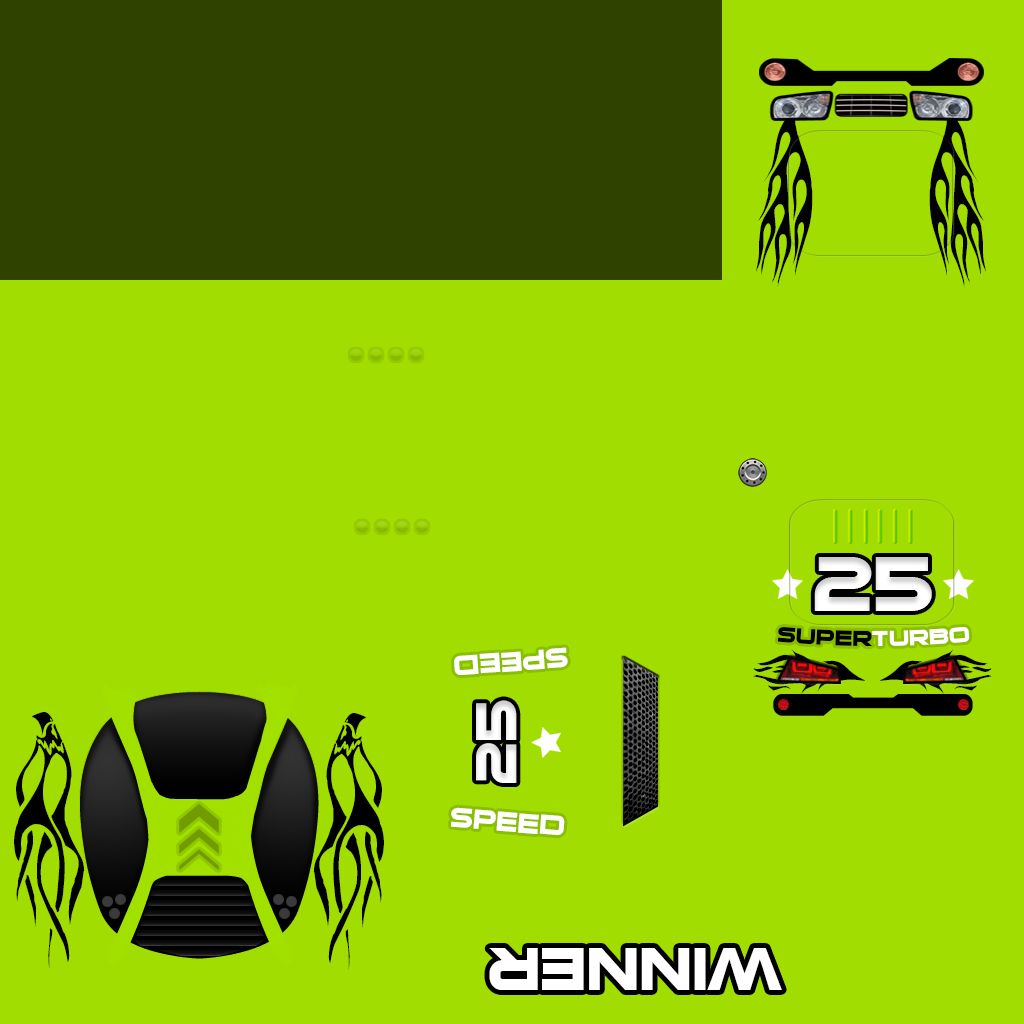
<style>
.page{position:relative;width:1024px;height:1024px;background:#a1dd00}
.page>*{position:absolute;margin:0}
.t1{font:89.2px "VehicleDecals'Flames&Art'";color:#010101;font-variant:small-caps;scale:0.86 1}
.t2{font:89.2px "VehicleDecals'Flames&Art'";color:#000000;font-variant:small-caps;scale:0.86 1}
.t3{font:70.1px "SuiGenerisBold";color:#ffffff;font-variant:small-caps}
.t4{font:30px "SuiGenerisBold";color:#000000;font-variant:small-caps}
.t5{font:30px "SuiGenerisBold";color:#ffffff;font-variant:small-caps}
.t6{font:36.8px "SuiGenerisBold";color:#ffffff;font-variant:small-caps}
.t7{font:72px "VehicleDecals'Flames&Art'";font-variant:small-caps;scale:0.49 1}
.t8{font:53.2px "SuiGenerisBold";color:#ffffff;font-variant:small-caps;scale:0.93 1}
.t9{font:79.7px "VehicleDecals'Flames&Art'";color:#000000;font-variant:small-caps;scale:0.8 1}
.t10{font:78.7px "SuiGenerisBold";color:#ffffff;font-variant:small-caps}
</style>
<div class="page">
<p class="t1" style="left:756px;top:101px;width:57px;height:186px;rotate:90deg">c</p>
<p class="t2" style="left:929px;top:101px;width:57px;height:186px;rotate:90deg">c</p>
<p class="t3" style="left:814px;top:557px;width:118px;height:54px">25</p>
<p class="t4" style="left:777px;top:627px;width:193px;height:19px">super<span class="t5">turbo</span></p>
<p class="t6" style="left:454px;top:647px;width:114px;height:28px;rotate:176deg">speed</p>
<p class="t7" style="left:753px;top:649px;width:112px;height:45px;rotate:180deg">s</p>
<p class="t7" style="left:880px;top:649px;width:112px;height:45px">s</p>
<p class="t8" style="left:476px;top:700px;width:41px;height:83px;rotate:-90deg">25</p>
<p class="t9" style="left:14px;top:712px;width:71px;height:257px;rotate:90deg">4</p>
<p class="t9" style="left:313px;top:713px;width:71px;height:257px;rotate:90deg">4</p>
<p class="t6" style="left:451px;top:807px;width:114px;height:28px;rotate:5deg">speed</p>
<p class="t10" style="left:489px;top:948px;width:293px;height:42px;rotate:180deg">winner</p>
</div>
